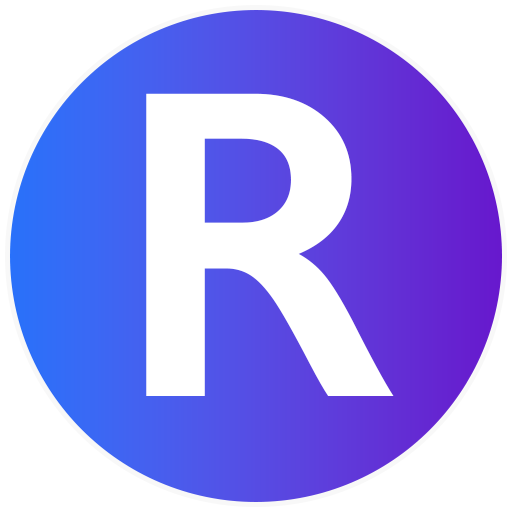
<style>
.page{position:relative;width:512px;height:512px;background:#ffffff}
.page>*{position:absolute;margin:0}
.t1{font:442.9px "GillSans-SemiBold";color:#ffffff;text-transform:uppercase}
</style>
<div class="page">
<p class="t1" style="left:146px;top:93px;width:248px;height:303px">R</p>
</div>
